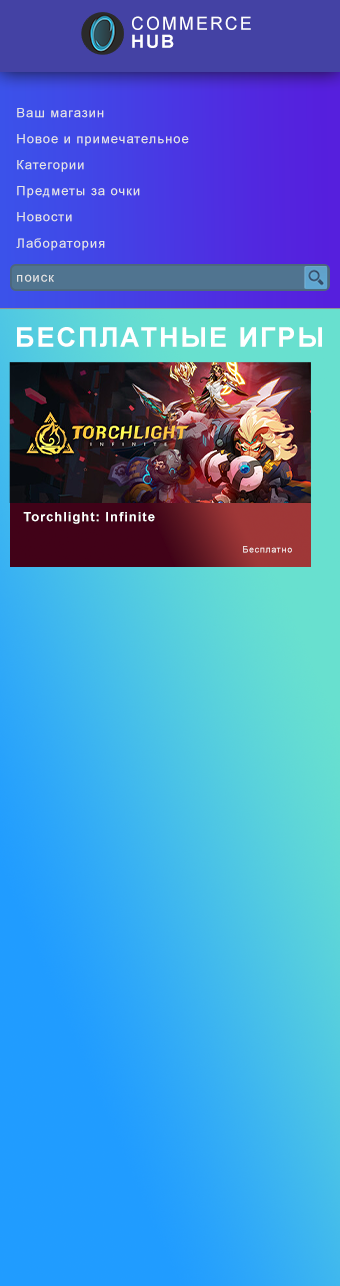
<style>
.page{position:relative;width:340px;height:1286px}
.page>*{position:absolute;margin:0}
.t1{font:18px/18px "ArialMT";letter-spacing:0.075em;color:#ffffff;text-transform:uppercase}
.t2{font:18px/18px "Arial-BoldMT";letter-spacing:0.075em;color:#ffffff;text-transform:uppercase}
.t3{font:13px "ArialMT";letter-spacing:0.075em;color:#e5e5e5}
.t4{font:27px "Arial-BoldMT";letter-spacing:0.075em;color:#ffffff}
.t5{font:13px "Arial-BoldMT";letter-spacing:0.075em;color:#ffffff}
.t6{font:9px "ArialMT";letter-spacing:0.075em}
</style>
<div class="page">
<p class="t1" style="left:132px;top:16px;width:119px;height:32px">Commerce<br><span class="t2">Hub</span></p>
<p class="t3" style="left:17px;top:108px;width:87px;height:10px">Ваш магазин</p>
<p class="t3" style="left:17px;top:134px;width:172px;height:12px">Новое и примечательное</p>
<p class="t3" style="left:17px;top:160px;width:67px;height:12px">Категории</p>
<p class="t3" style="left:17px;top:186px;width:123px;height:12px">Предметы за очки</p>
<p class="t3" style="left:17px;top:212px;width:55px;height:10px">Новости</p>
<p class="t3" style="left:16px;top:238px;width:89px;height:13px">Лаборатория</p>
<p class="t3" style="left:17px;top:274px;width:37px;height:8px">поиск</p>
<p class="t4" style="left:17px;top:327px;width:305px;height:20px">БЕСПЛАТНЫЕ ИГРЫ</p>
<p class="t5" style="left:23px;top:512px;width:132px;height:12px">Torchlight: Infinite</p>
<p class="t6" style="left:243px;top:546px;width:49px;height:7px">Бесплатно</p>
</div>
